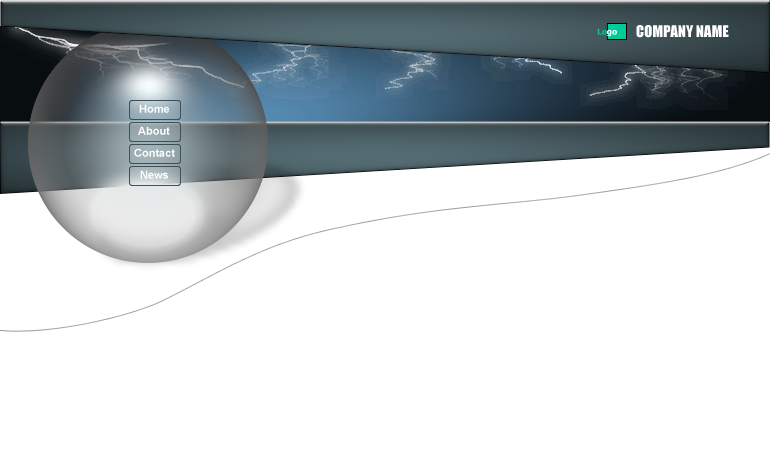
<style>
.page{position:relative;width:770px;height:460px;background:#ffffff}
.page>*{position:absolute;margin:0}
.t1{font:15px "Impact";color:#ffffff}
.t2{font:11px "Arial-BoldMT";color:#ffffff}
</style>
<div class="page">
<p class="t1" style="left:636px;top:25px;width:93px;height:13px">COMPANY NAME</p>
<p class="t2" style="left:139px;top:104px;width:30px;height:9px">Home</p>
<p class="t2" style="left:138px;top:126px;width:32px;height:9px">About</p>
<p class="t2" style="left:134px;top:148px;width:41px;height:9px">Contact</p>
<p class="t2" style="left:140px;top:170px;width:28px;height:9px">News</p>
</div>
